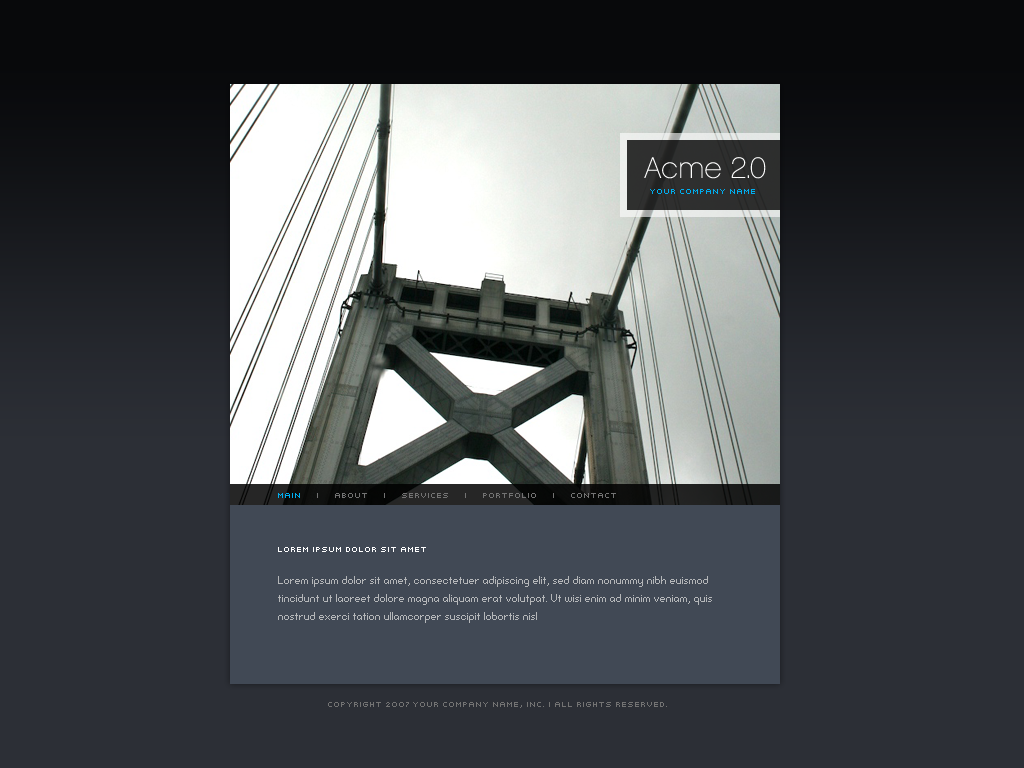
<style>
.page{position:relative;width:1024px;height:768px;background:#2c2f36}
.page>*{position:absolute;margin:0}
.t1{font:30px "Chalet-ParisNineteenSixty";color:#ffffff}
.t2{font:8px "FrucadeMediumExtended";color:#00aeef;text-transform:uppercase}
.t3{font:8px "FrucadeMediumExtended";color:#737373;text-transform:uppercase}
.t4{font:8px "FrucadeMediumExtended";color:#ffffff}
.t5{font:8px/18px "FFFHarmony";color:#b5b7b9}
</style>
<div class="page">
<p class="t1" style="left:644px;top:157px;width:122px;height:22px">Acme 2.0</p>
<p class="t2" style="left:650px;top:189px;width:105px;height:5px">your company name</p>
<p class="t3" style="left:278px;top:493px;width:338px;height:5px"><span class="t2">main</span>     |     about     |     services     |     portfolio     |     contact</p>
<p class="t4" style="left:278px;top:547px;width:148px;height:5px">Lorem Ipsum Dolor Sit Amet</p>
<p class="t5" style="left:278px;top:576px;width:434px;height:47px">Lorem ipsum dolor sit amet, consectetuer adipiscing elit, sed diam nonummy nibh euismod tincidunt ut laoreet dolore magna aliquam erat volutpat. Ut wisi enim ad minim veniam, quis nostrud exerci tation ullamcorper suscipit lobortis nisl</p>
<p class="t3" style="left:328px;top:702px;width:339px;height:6px">copyright 2007 your company name, inc. | all rights reserved.</p>
</div>
